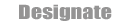
<style>
.page{position:relative;width:128px;height:24px;background:#ffffff}
.page>*{position:absolute;margin:0}
.t1{font:18px "Impact";color:#959494;scale:1.25 1}
</style>
<div class="page">
<p class="t1" style="left:19px;top:4px;width:93px;height:17px">Designate</p>
</div>
